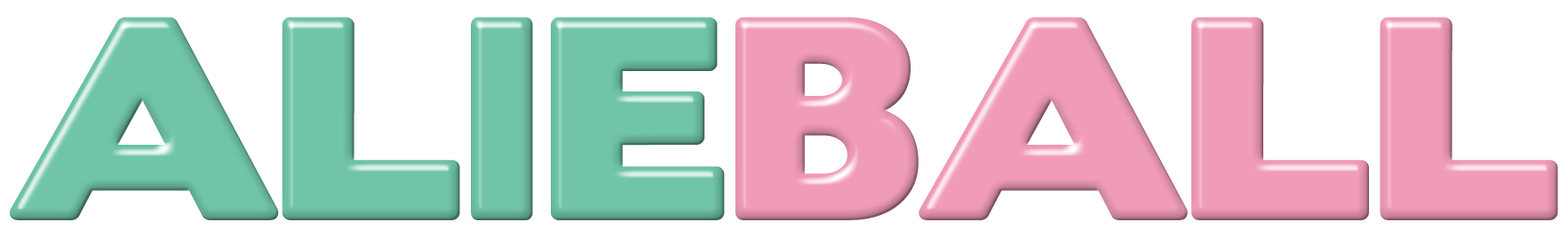
<style>
.page{position:relative;width:1568px;height:238px;background:#ffffff}
.page>*{position:absolute;margin:0}
.t1{font:258.5px "BorisBlackBloxx";color:#6fc4a9}
.t2{font:258.5px "BorisBlackBloxx";color:#f19cb7}
</style>
<div class="page">
<p class="t1" style="left:10px;top:17px;width:1548px;height:203px">ALIE<span class="t2">BALL</span></p>
</div>
